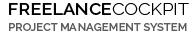
<style>
.page{position:relative;width:196px;height:33px;background:#ffffff}
.page>*{position:absolute;margin:0}
.t1{font:16.8px "Raleway-SemiBold";color:#000000;scale:1.07 1}
.t2{font:16.8px "Raleway-Light";color:#000000;scale:1.07 1}
.t3{font:11.1px "Raleway-SemiBold";color:#5d5d5d}
</style>
<div class="page">
<p class="t1" style="left:9px;top:3px;width:180px;height:12px">FREELANCE<span class="t2">COCKPIT</span></p>
<p class="t3" style="left:9px;top:23px;width:178px;height:8px">PROJECT MANAGEMENT SYSTEM</p>
</div>
